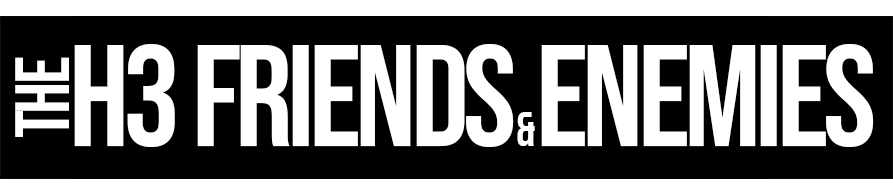
<style>
.page{position:relative;width:893px;height:195px;background:#000000}
.page>*{position:absolute;margin:0}
.t1{font:143.2px "BebasNeue-Regular";letter-spacing:-0.04em;color:#ffffff}
.t2{font:143.2px "BebasNeue-Regular";color:#ffffff}
.t3{font:47.1px "BebasNeue-Regular";color:#ffffff}
.t4{font:76.8px "BebasNeue-Regular";letter-spacing:-0.04em;color:#ffffff}
</style>
<div class="page">
<p class="t1" style="left:74px;top:44px;width:800px;height:103px">H3 FRIEND<span class="t2">S</span><span class="t3">&amp;</span>ENEMIES</p>
<p class="t4" style="left:15px;top:57px;width:54px;height:80px;rotate:-90deg">the</p>
</div>
